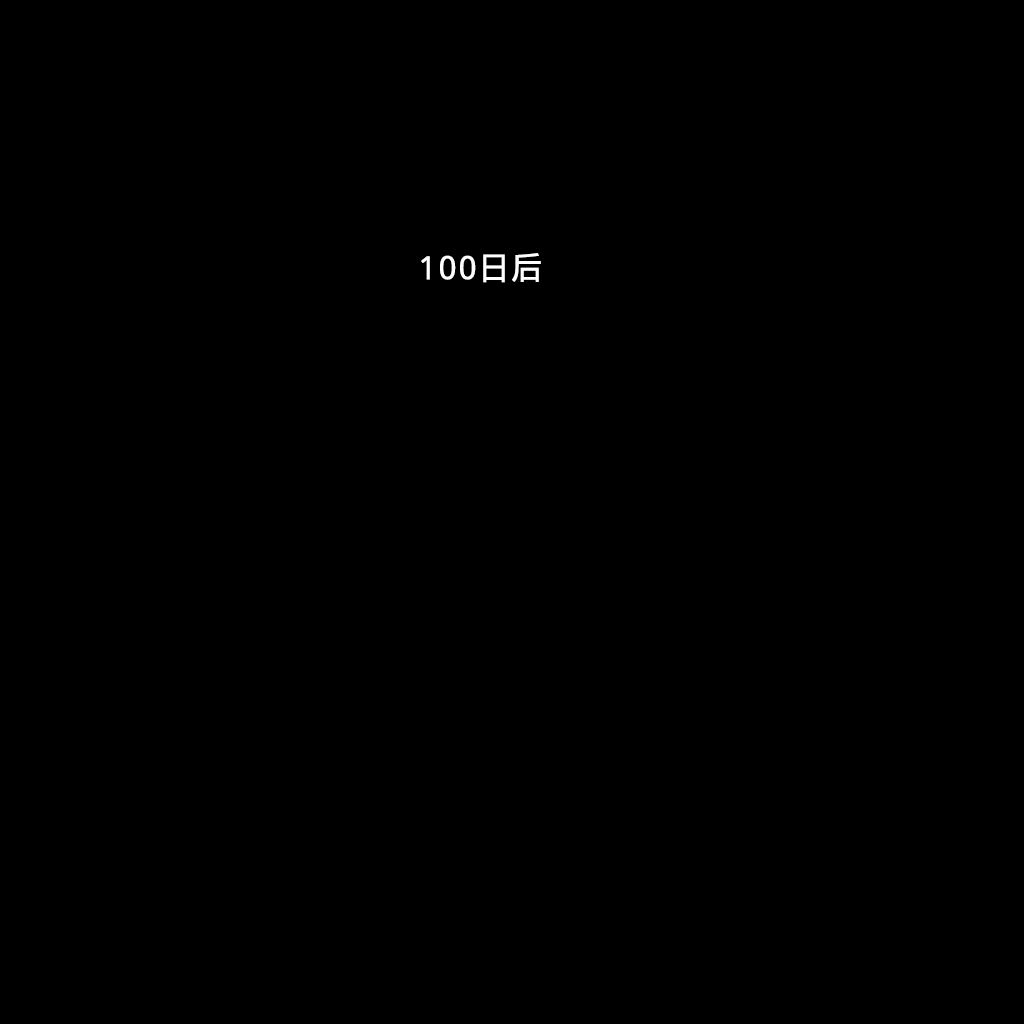
<style>
.page{position:relative;width:1024px;height:1024px;background:#000000}
.page>*{position:absolute;margin:0}
.t1{font:32px "WenQuanYiMicroHeiMono";color:#ffffff;font-weight:bold}
</style>
<div class="page">
<p class="t1" style="left:421px;top:253px;width:120px;height:30px">100日后</p>
</div>
